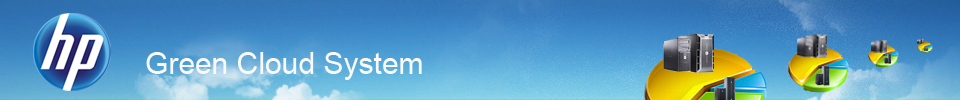
<style>
.page{position:relative;width:960px;height:100px}
.page>*{position:absolute;margin:0}
.t1{font:30px "ArialMT";color:#f9f9f9}
</style>
<div class="page">
<p class="t1" style="left:146px;top:52px;width:276px;height:28px">Green Cloud System</p>
</div>
